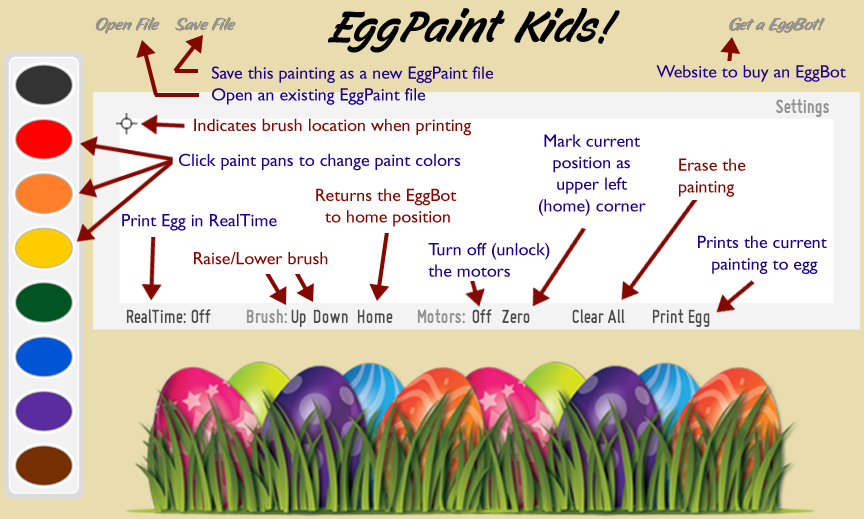
<style>
.page{position:relative;width:864px;height:519px;background:#e9ddaf}
.page>*{position:absolute;margin:0}
.t1{font:18px "GillSans";color:#1e0090}
.t2{font:18px "GillSans";color:#1d0090}
.t3{font:18px "GillSans";color:#850800}
</style>
<div class="page">
<p class="t1" style="left:656px;top:65px;width:190px;height:17px">Website to buy an EggBot</p>
<p class="t2" style="left:212px;top:66px;width:281px;height:39px">Save this painting as a new EggPaint file<br>Open an existing EggPaint file</p>
<p class="t3" style="left:194px;top:118px;width:277px;height:18px">Indicates brush location when printing</p>
<p class="t1" style="left:539px;top:134px;width:107px;height:82px;text-align:center">Mark current<br>position as<br>upper left<br>(home) corner</p>
<p class="t2" style="left:179px;top:153px;width:282px;height:18px">Click paint pans to change paint colors</p>
<p class="t3" style="left:679px;top:158px;width:67px;height:39px">Erase the<br>painting</p>
<p class="t3" style="left:316px;top:188px;width:141px;height:39px;text-align:center">Returns the EggBot <br>to home position</p>
<p class="t2" style="left:122px;top:214px;width:155px;height:17px">Print Egg in RealTime</p>
<p class="t2" style="left:428px;top:242px;width:122px;height:35px">Turn off (unlock)<br>the motors</p>
<p class="t1" style="left:698px;top:235px;width:129px;height:39px;text-align:center">Prints the current <br>painting to egg</p>
<p class="t3" style="left:194px;top:252px;width:134px;height:13px">Raise/Lower brush</p>
</div>
